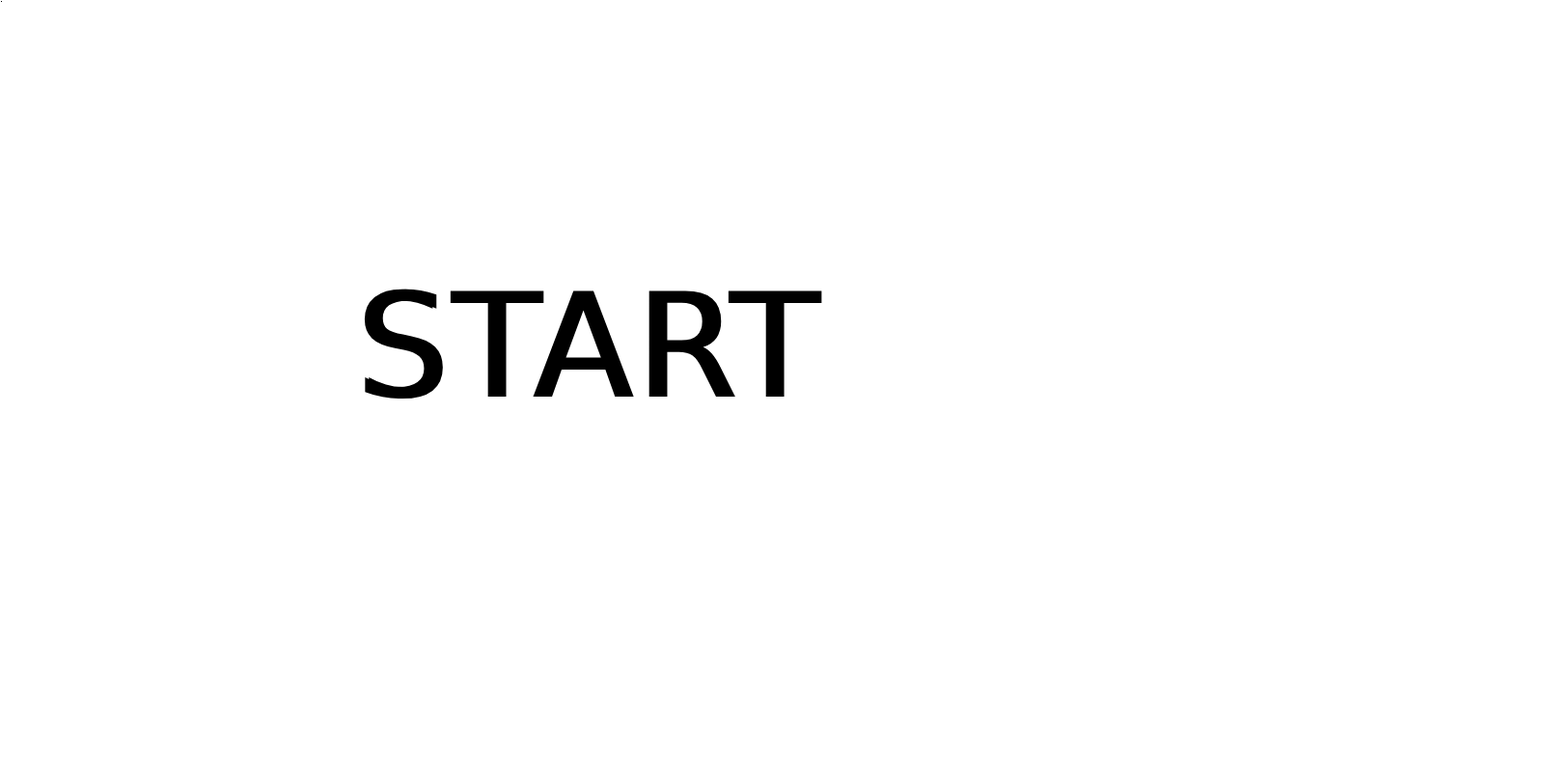
<style>
.page{position:relative;width:1544px;height:772px;background:#ffffff}
.page>*{position:absolute;margin:0}
.t1{font:144.8px "DejaVuSans";color:#000000;font-weight:bold}
</style>
<div class="page">
<p class="t1" style="left:364px;top:289px;width:458px;height:111px">START</p>
</div>
